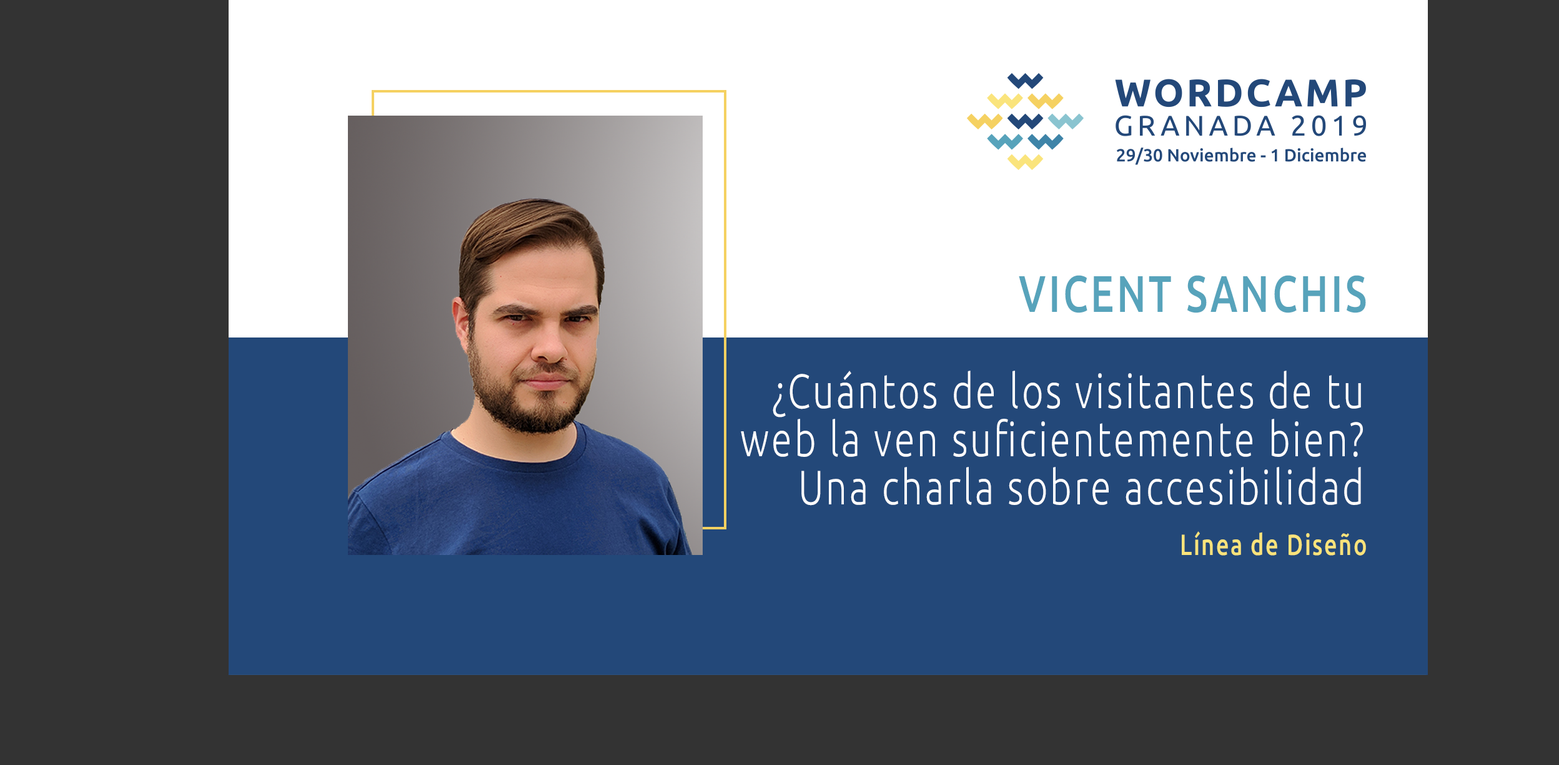
<style>
.page{position:relative;width:1559px;height:765px;background:#333333}
.page>*{position:absolute;margin:0}
.t1{font:51.4px "Ubuntu-Medium";letter-spacing:0.068em;color:#57a3bb;text-transform:uppercase;scale:0.77 1}
.t2{font:48.2px/48.2px "Ubuntu-Light";letter-spacing:0.068em;color:#ffffff;scale:0.77 1}
.t3{font:29.2px "Ubuntu-Medium";letter-spacing:0.068em;color:#f9e37b;scale:0.77 1}
</style>
<div class="page">
<p class="t1" style="left:1019px;top:275px;width:347px;height:38px">Vicent Sanchis</p>
<p class="t2" style="left:741px;top:370px;width:622px;height:135px;text-align:right">¿Cuántos de los visitantes de tu web la ven suficientemente bien? Una charla sobre accesibilidad</p>
<p class="t3" style="left:1182px;top:531px;width:184px;height:24px">Línea de Diseño</p>
</div>
